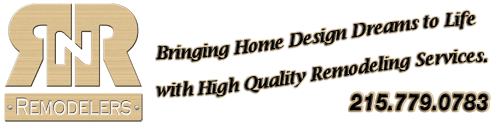
<style>
.page{position:relative;width:500px;height:125px;background:#ffffff}
.page>*{position:absolute;margin:0}
.t1{font:19px/26.3px "LucidaBright-DemiItalic";letter-spacing:-0.02em;color:#000000;scale:0.91 1}
.t2{font:24px "HelveticaNeueLTStd-BlkIt";letter-spacing:-0.02em;color:#000000;scale:0.81 1}
</style>
<div class="page">
<p class="t1" style="left:156px;top:10px;width:332px;height:87px">Bringing Home Design Dreams to Life <br>with High Quality Remodeling Services.</p>
<p class="t2" style="left:349px;top:93px;width:140px;height:18px">215.779.0783</p>
</div>
